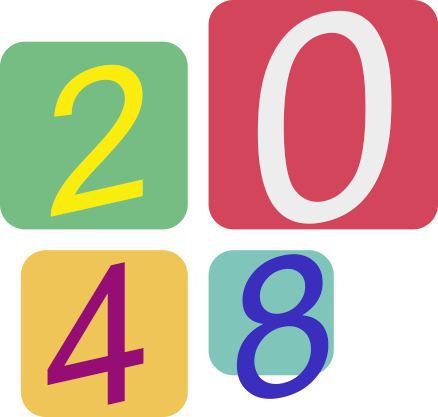
<style>
.page{position:relative;width:438px;height:417px;background:#ffffff}
.page>*{position:absolute;margin:0}
.t1{font:285.9px "ArialMT";color:#ededed}
.t2{font:194.1px "ArialMT";color:#faec0d}
.t3{font:194.1px "ArialMT";color:#3b2dbd}
.t4{font:194.1px "ArialMT";color:#960e74}
</style>
<div class="page">
<p class="t1" style="left:257px;top:10px;width:135px;height:214px;rotate:-13deg">0</p>
<p class="t2" style="left:50px;top:64px;width:93px;height:153px;rotate:-13deg">2</p>
<p class="t3" style="left:236px;top:254px;width:93px;height:145px;rotate:-13deg">8</p>
<p class="t4" style="left:47px;top:262px;width:97px;height:143px;rotate:-13deg">4</p>
</div>
